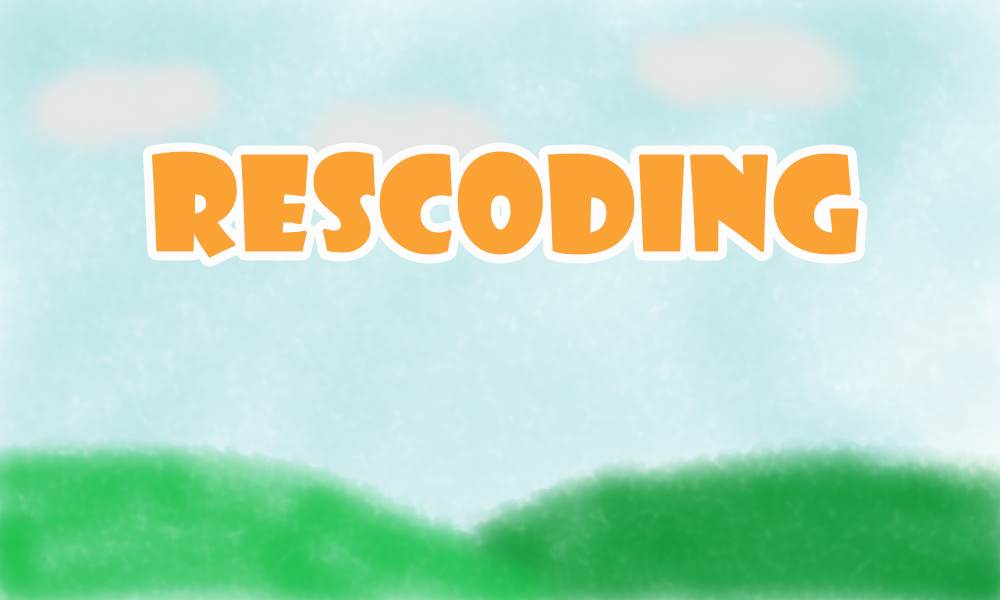
<style>
.page{position:relative;width:1000px;height:600px}
.page>*{position:absolute;margin:0}
.t1{font:125.3px "ShowcardGothic-Reg";color:#faa233;font-weight:bold}
</style>
<div class="page">
<p class="t1" style="left:151px;top:151px;width:708px;height:107px">RESCODING</p>
</div>
